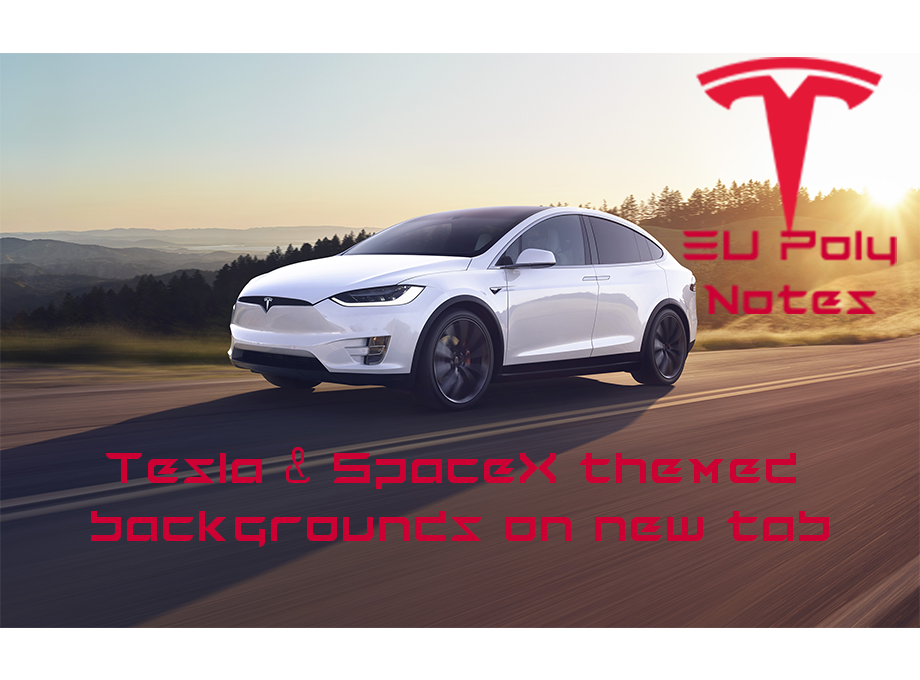
<style>
.page{position:relative;width:920px;height:680px}
.page>*{position:absolute;margin:0}
.t1{font:48px "TESLA";color:#cc0033}
</style>
<div class="page">
<p class="t1" style="left:91px;top:447px;width:738px;height:100px;text-align:center">Tesla &amp; SpaceX themed <br>backgrounds on new tab</p>
</div>
